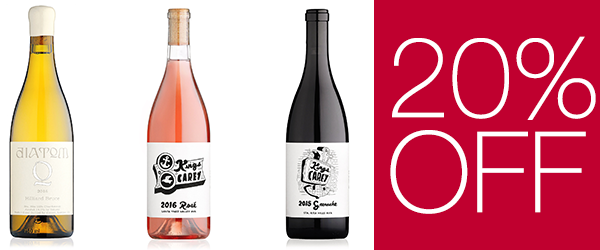
<style>
.page{position:relative;width:600px;height:250px;background:#ffffff}
.page>*{position:absolute;margin:0}
.t1{font:112.5px/95.1px "HelveNueThin";color:#ffffff}
</style>
<div class="page">
<p class="t1" style="left:390px;top:36px;width:206px;height:178px">20%<br>OFF</p>
</div>
